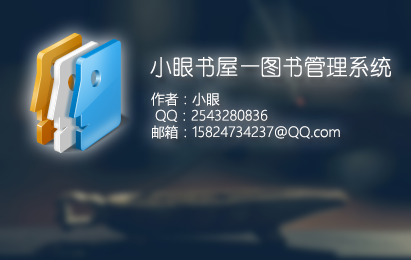
<style>
.page{position:relative;width:411px;height:260px}
.page>*{position:absolute;margin:0}
.t1{font:22px "YouYuan";color:#fefefe}
.t2{font:13.7px "MicrosoftYaHeiLight";color:#fefefe}
</style>
<div class="page">
<p class="t1" style="left:150px;top:56px;width:241px;height:22px">小眼书屋—图书管理系统</p>
<p class="t2" style="left:151px;top:92px;width:189px;height:47px">作者：小眼<br> QQ：2543280836<br>邮箱：15824734237@QQ.com</p>
</div>
